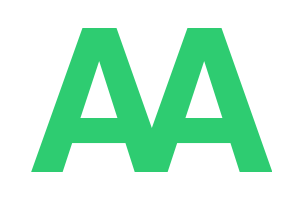
<style>
.page{position:relative;width:300px;height:200px;background:#ffffff}
.page>*{position:absolute;margin:0}
.t1{font:200px "Helvetica-Bold";letter-spacing:-0.2em;color:#2ecc71}
</style>
<div class="page">
<p class="t1" style="left:31px;top:28px;width:241px;height:144px">AA</p>
</div>
